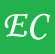
<style>
.page{position:relative;width:55px;height:54px;background:#22b14c}
.page>*{position:absolute;margin:0}
.t1{font:37.3px "STLiti";color:#f8fcf9;font-weight:bold}
</style>
<div class="page">
<p class="t1" style="left:4px;top:13px;width:46px;height:27px">EC</p>
</div>
